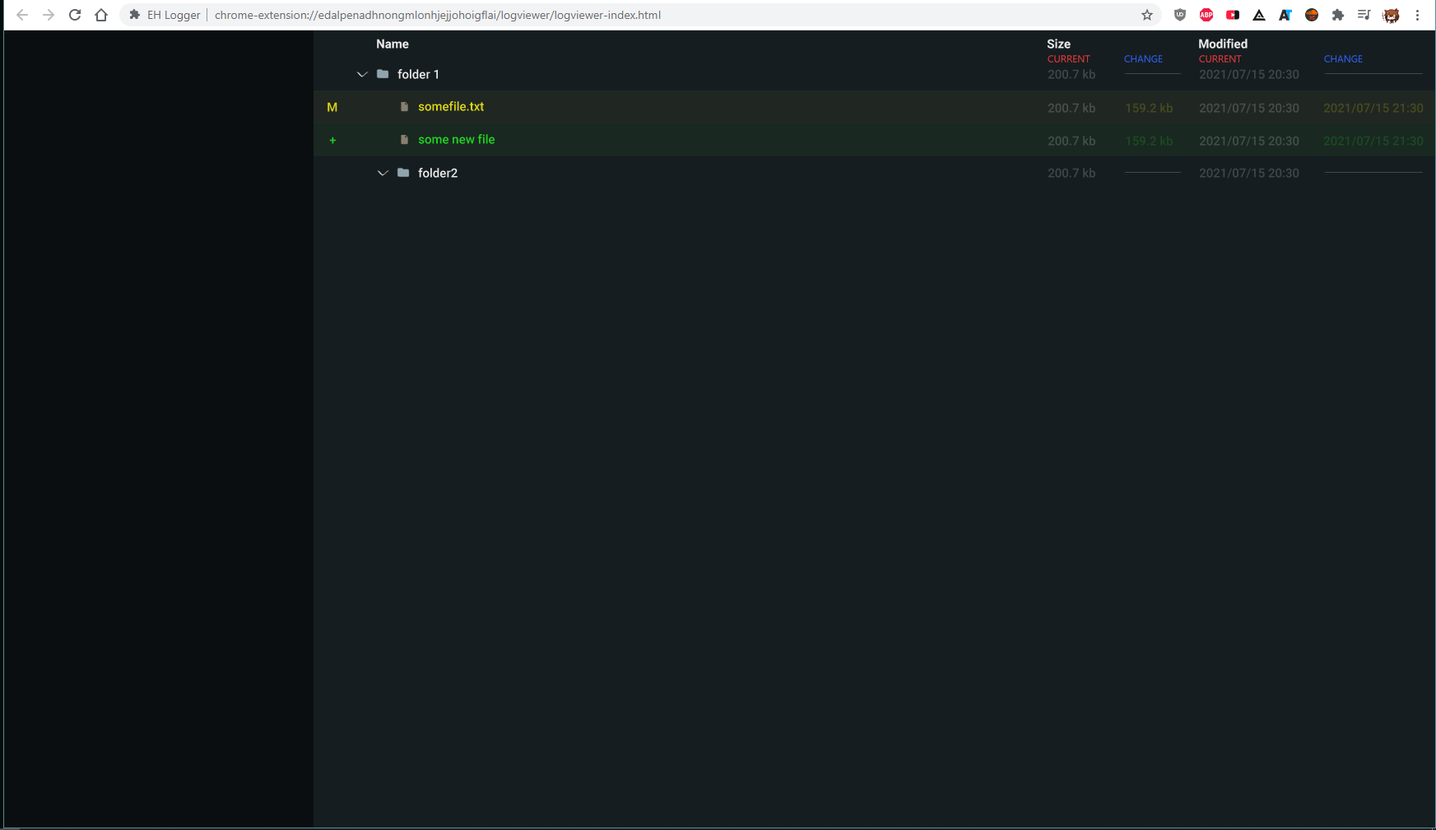
<style>
.page{position:relative;width:1436px;height:830px;background:#151d20}
.page>*{position:absolute;margin:0}
.t1{font:12.3px "Roboto-Bold";color:#eaeaea}
.t2{font:9.9px "SegoeUI";color:#d83a3a}
.t3{font:9.9px "SegoeUI";color:#2f5ee4}
.t4{font:12.3px "Roboto-Medium";color:#eaeaea}
.t5{font:12.3px "Roboto-Medium";color:#404648}
.t6{font:12.3px "Roboto-Medium";color:#dad316}
.t7{font:12.3px "Roboto-Medium";color:#484e4a}
.t8{font:12.3px "Roboto-Medium";color:#454920}
.t9{font:12.3px "Roboto-Medium";color:#20d020}
.t10{font:12.3px "Roboto-Medium";color:#434f49}
.t11{font:12.3px "Roboto-Medium";color:#1a4a21}
</style>
<div class="page">
<p class="t1" style="left:377px;top:39px;width:32px;height:10px">Name</p>
<p class="t1" style="left:1047px;top:39px;width:24px;height:10px">Size</p>
<p class="t1" style="left:1199px;top:39px;width:49px;height:10px">Modified</p>
<p class="t2" style="left:1048px;top:55px;width:42px;height:8px">CURRENT</p>
<p class="t3" style="left:1124px;top:55px;width:39px;height:8px">CHANGE</p>
<p class="t2" style="left:1199px;top:55px;width:43px;height:8px">CURRENT</p>
<p class="t3" style="left:1324px;top:55px;width:39px;height:8px">CHANGE</p>
<p class="t4" style="left:397px;top:69px;width:41px;height:10px">folder 1</p>
<p class="t5" style="left:1048px;top:69px;width:47px;height:10px">200.7 kb</p>
<p class="t5" style="left:1199px;top:69px;width:100px;height:11px">2021/07/15 20:30</p>
<p class="t6" style="left:418px;top:101px;width:66px;height:10px">somefile.txt</p>
<p class="t6" style="left:328px;top:102px;width:9px;height:10px">M</p>
<p class="t7" style="left:1048px;top:103px;width:47px;height:10px">200.7 kb</p>
<p class="t8" style="left:1126px;top:103px;width:47px;height:10px">159.2 kb</p>
<p class="t7" style="left:1199px;top:103px;width:100px;height:11px">2021/07/15 20:30</p>
<p class="t8" style="left:1323px;top:103px;width:101px;height:11px">2021/07/15 21:30</p>
<p class="t9" style="left:329px;top:137px;width:7px;height:7px">+</p>
<p class="t9" style="left:418px;top:134px;width:77px;height:10px">some new file</p>
<p class="t10" style="left:1048px;top:136px;width:47px;height:10px">200.7 kb</p>
<p class="t11" style="left:1126px;top:136px;width:47px;height:10px">159.2 kb</p>
<p class="t10" style="left:1199px;top:136px;width:100px;height:10px">2021/07/15 20:30</p>
<p class="t11" style="left:1323px;top:136px;width:101px;height:10px">2021/07/15 21:30</p>
<p class="t4" style="left:418px;top:168px;width:40px;height:10px">folder2</p>
<p class="t5" style="left:1048px;top:168px;width:47px;height:10px">200.7 kb</p>
<p class="t5" style="left:1199px;top:168px;width:100px;height:11px">2021/07/15 20:30</p>
</div>
